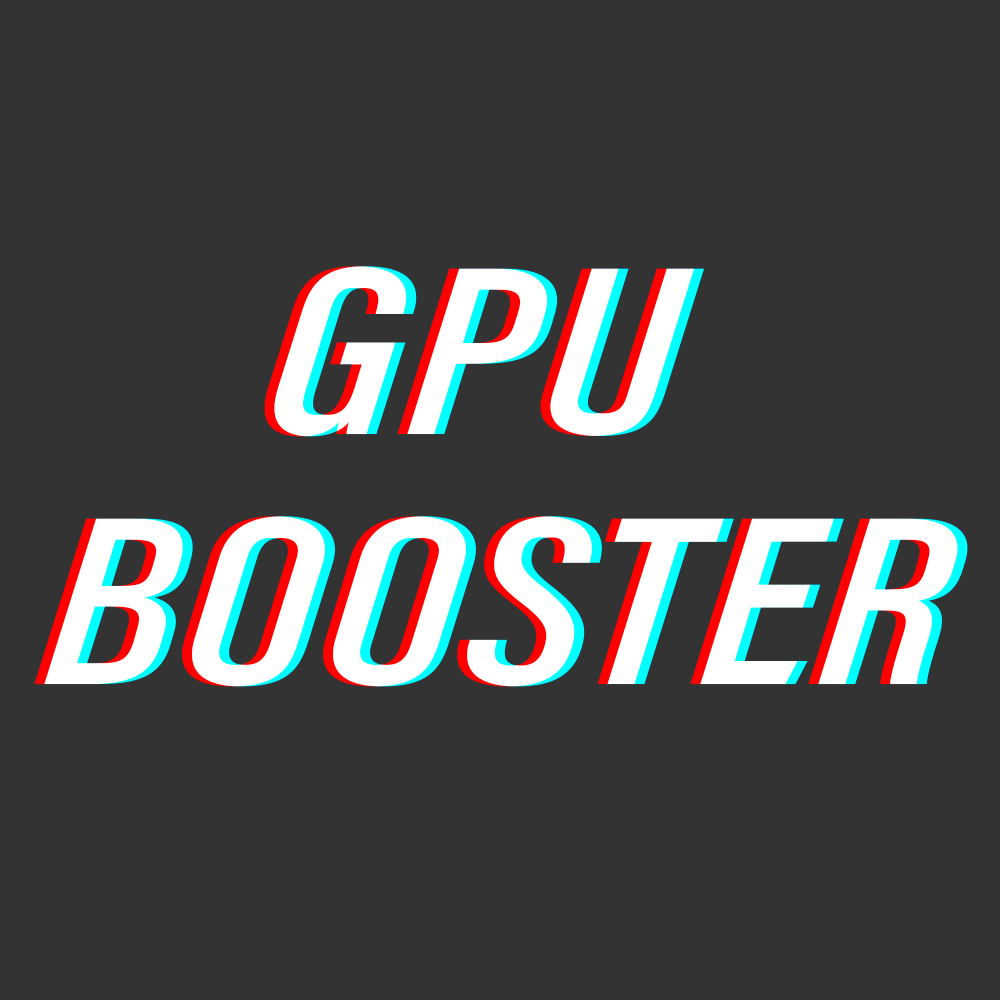
<style>
.page{position:relative;width:1000px;height:1000px;background:#333333}
.page>*{position:absolute;margin:0}
.t1{font:247.5px/250px "AcuminConcept-ExtraCondensedBoldItalic";color:#ffffff;scale:1.47 1}
</style>
<div class="page">
<p class="t1" style="left:34px;top:266px;width:924px;height:421px;text-align:center">GPU <br>BOOSTER</p>
<p class="t1" style="left:44px;top:266px;width:924px;height:421px;text-align:center">GPU <br>BOOSTER</p>
<p class="t1" style="left:44px;top:266px;width:924px;height:421px;text-align:center">GPU <br>BOOSTER</p>
</div>
